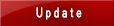
<style>
.page{position:relative;width:114px;height:26px}
.page>*{position:absolute;margin:0}
.t1{font:13.1px "HCRDotum-Bold";letter-spacing:0.26em;color:#ffffff;scale:0.76 1}
</style>
<div class="page">
<p class="t1" style="left:36px;top:7px;width:46px;height:13px">Update</p>
</div>
